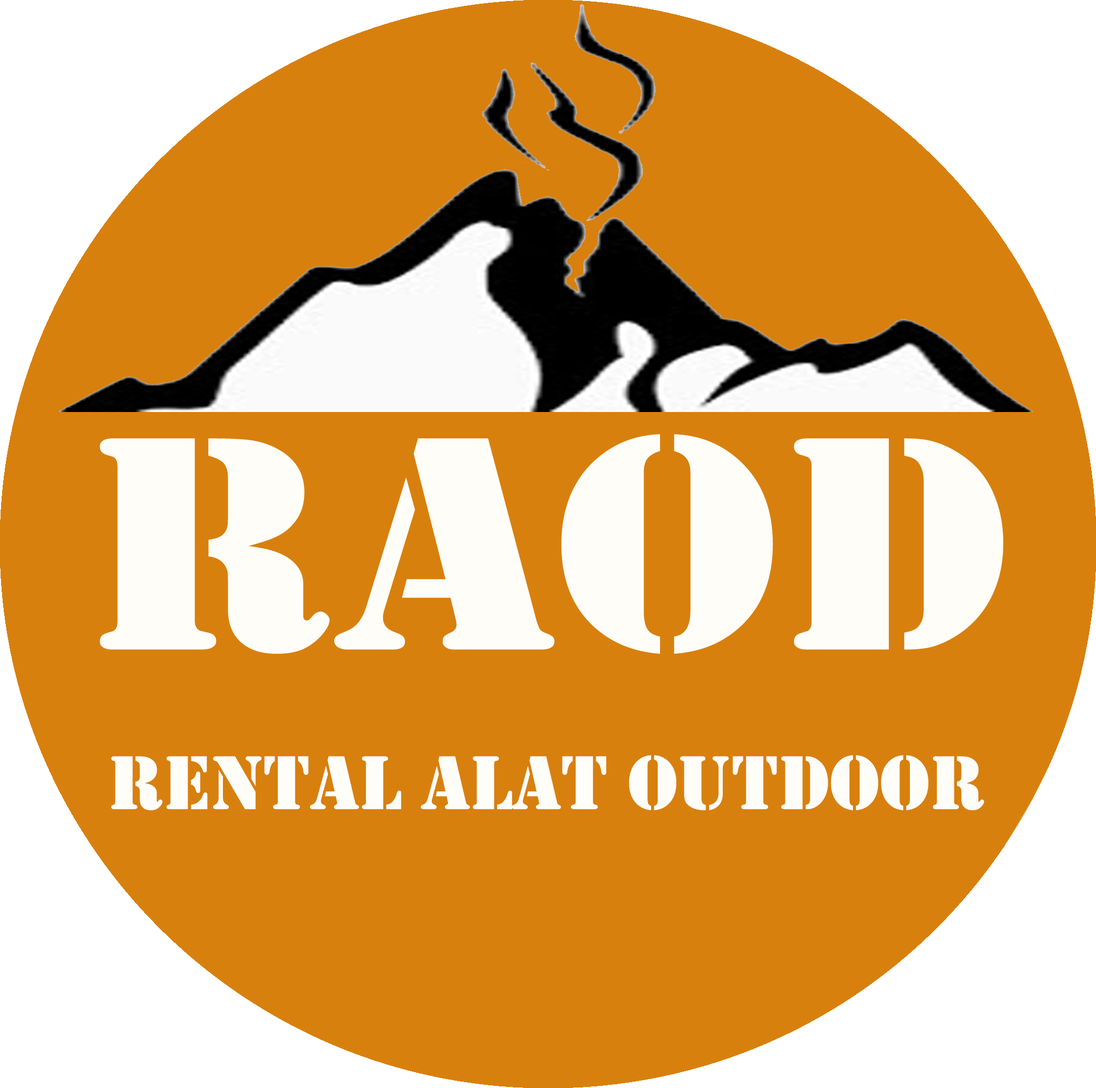
<style>
.page{position:relative;width:1096px;height:1088px;background:#d8800d}
.page>*{position:absolute;margin:0}
.t1{font:79.1px "Stencil";color:#fffdf8}
</style>
<div class="page">
<p class="t1" style="left:111px;top:755px;width:873px;height:56px">rental alat outdoor</p>
</div>
